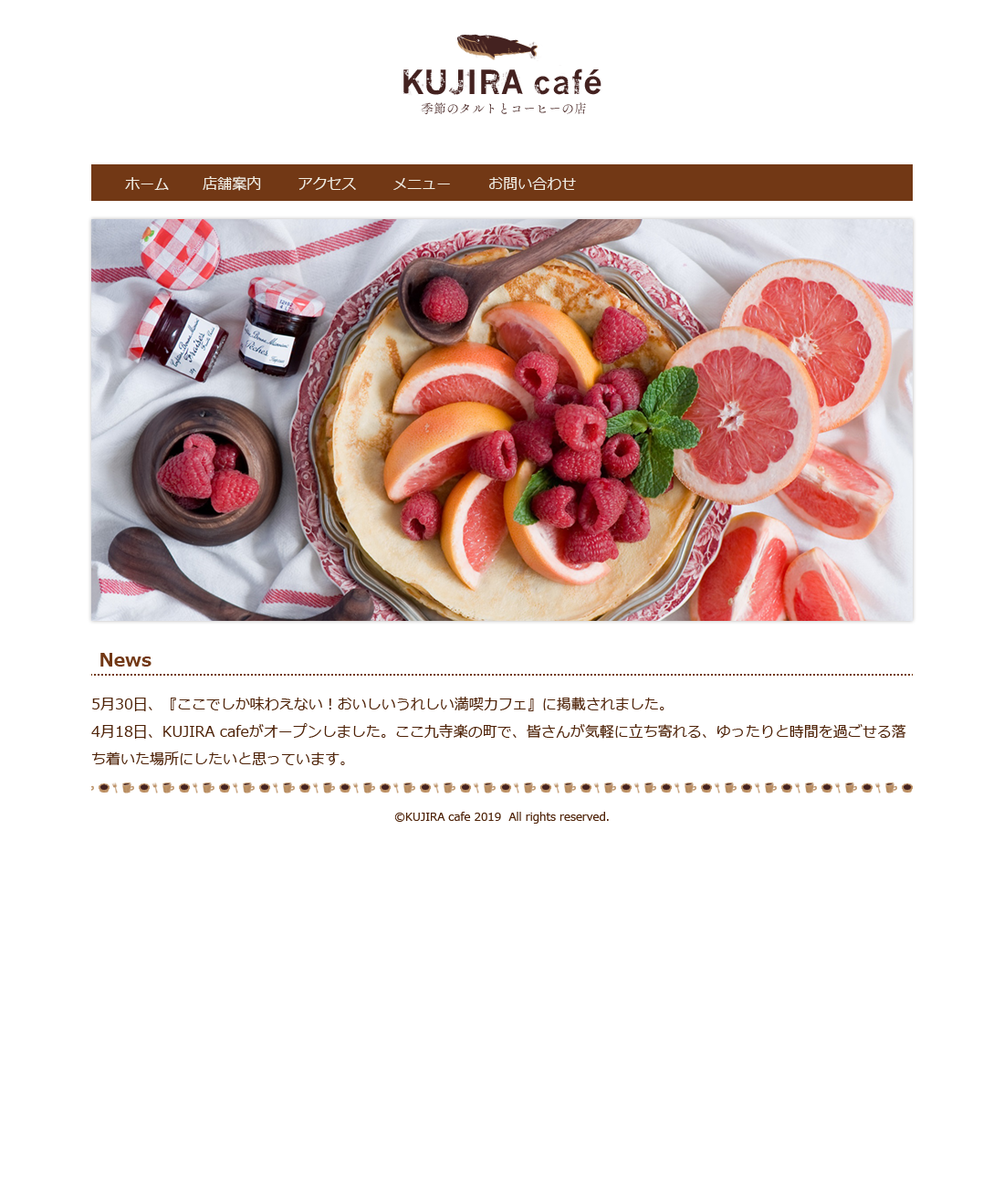
<style>
.page{position:relative;width:1004px;height:1187px;background:#ffffff}
.page>*{position:absolute;margin:0}
.t1{font:14.6px "Meiryo";color:#f1ece0}
.t2{font:18.3px "Meiryo-Bold";color:#723815}
.t3{font:14.6px/27.4px "Meiryo";color:#4d2106}
.t4{font:11px "Meiryo";color:#4d2106}
</style>
<div class="page">
<p class="t1" style="left:125px;top:177px;width:44px;height:13px">ホーム</p>
<p class="t1" style="left:203px;top:176px;width:58px;height:15px">店舗案内</p>
<p class="t1" style="left:299px;top:177px;width:57px;height:13px">アクセス</p>
<p class="t1" style="left:394px;top:178px;width:56px;height:12px">メニュー</p>
<p class="t1" style="left:489px;top:177px;width:87px;height:13px">お問い合わせ</p>
<p class="t2" style="left:100px;top:653px;width:52px;height:14px">News</p>
<p class="t3" style="left:91px;top:697px;width:816px;height:69px">5月30日、『ここでしか味わえない！おいしいうれしい満喫カフェ』に掲載されました。<br>4月18日、KUJIRA cafeがオープンしました。ここ九寺楽の町で、皆さんが気軽に立ち寄れる、ゆったりと時間を過ごせる落ち着いた場所にしたいと思っています。</p>
<p class="t4" style="left:394px;top:812px;width:215px;height:12px">©KUJIRA cafe 2019  All rights reserved.</p>
</div>
